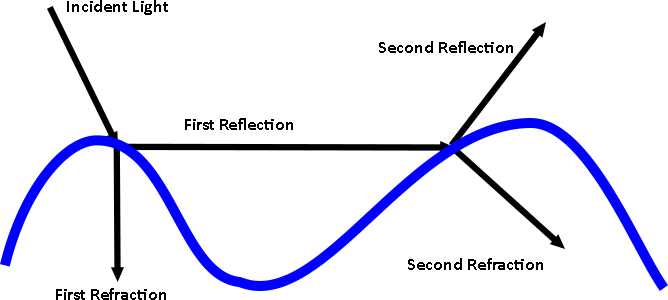
<style>
.page{position:relative;width:668px;height:300px;background:#ffffff}
.page>*{position:absolute;margin:0}
.t1{font:18px "Calibri-Bold";color:#000000}
</style>
<div class="page">
<p class="t1" style="left:67px;top:0px;width:101px;height:15px">Incident Light</p>
<p class="t1" style="left:379px;top:41px;width:134px;height:12px">Second Reflection</p>
<p class="t1" style="left:185px;top:118px;width:108px;height:12px">First Reflection</p>
<p class="t1" style="left:408px;top:258px;width:135px;height:12px">Second Refraction</p>
<p class="t1" style="left:56px;top:288px;width:110px;height:12px">First Refraction</p>
</div>
